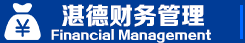
<style>
.page{position:relative;width:245px;height:43px;background:#003c97}
.page>*{position:absolute;margin:0}
.t1{font:24px "FZZDHJW--GB1-0";color:#ffffff}
.t2{font:12px "FZZDHJW--GB1-0";color:#ffffff}
</style>
<div class="page">
<p class="t1" style="left:62px;top:4px;width:142px;height:23px">湛德财务管理</p>
<p class="t2" style="left:51px;top:29px;width:160px;height:14px">Financial Management</p>
</div>
